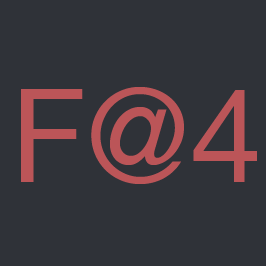
<style>
.page{position:relative;width:266px;height:266px;background:#2f3238}
.page>*{position:absolute;margin:0}
.t1{font:130px "HelveticaNeue";color:#bb5558}
</style>
<div class="page">
<p class="t1" style="left:21px;top:87px;width:236px;height:97px">F@4</p>
</div>
